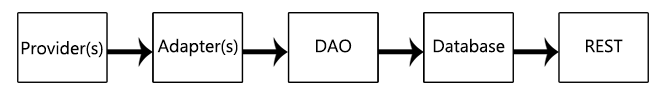
<style>
.page{position:relative;width:667px;height:98px;background:#ffffff}
.page>*{position:absolute;margin:0}
.t1{font:17.8px "MyanmarText";color:#000000}
</style>
<div class="page">
<p class="t1" style="left:21px;top:41px;width:82px;height:17px">Provider(s)</p>
<p class="t1" style="left:157px;top:38px;width:81px;height:19px">Adapter(s)</p>
<p class="t1" style="left:316px;top:39px;width:36px;height:14px">DAO</p>
<p class="t1" style="left:433px;top:38px;width:72px;height:15px">Database</p>
<p class="t1" style="left:586px;top:39px;width:37px;height:14px">REST</p>
</div>
